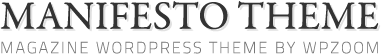
<style>
.page{position:relative;width:381px;height:56px;background:#ffffff}
.page>*{position:absolute;margin:0}
.t1{font:40px "GaramondPremrPro";color:#333333;text-transform:uppercase}
.t2{font:40px "GaramondPremrPro";text-transform:uppercase}
.t3{font:16px "TitilliumText14L-Bold";letter-spacing:0.114em;color:#777777;text-transform:uppercase}
</style>
<div class="page">
<p class="t1" style="left:0px;top:1px;width:379px;height:29px">MANIFESTO theme</p>
<p class="t2" style="left:2px;top:3px;width:379px;height:29px">MANIFESTO theme</p>
<p class="t3" style="left:1px;top:41px;width:377px;height:13px">magazine wordpress theme by wpzoom</p>
</div>
